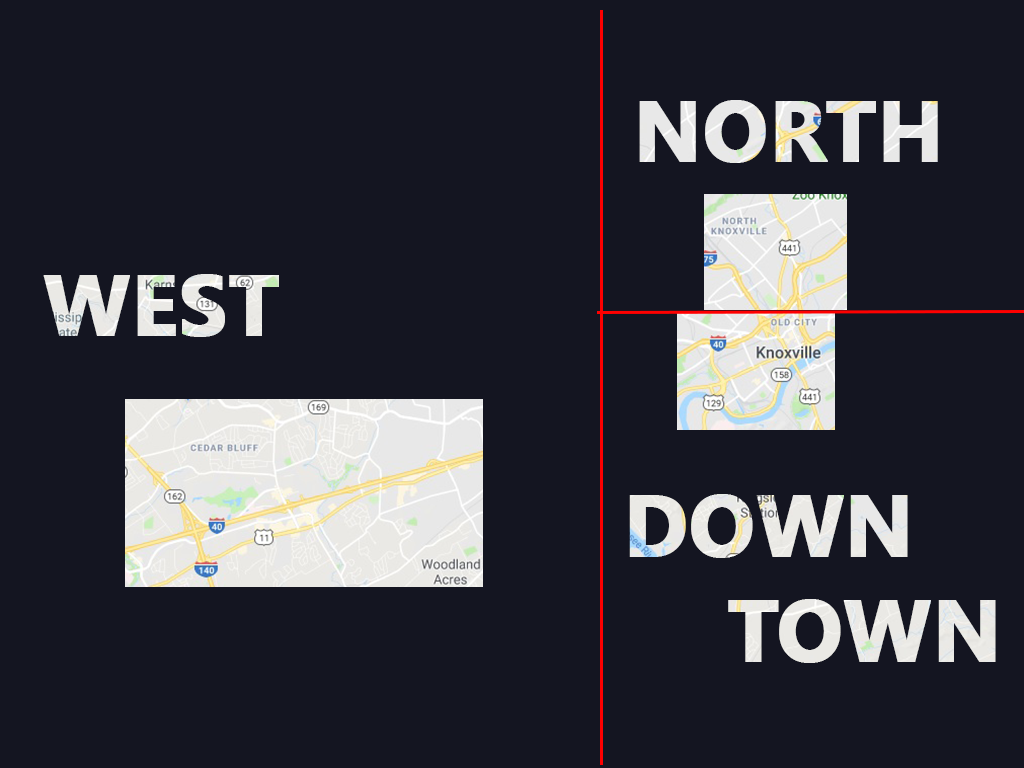
<style>
.page{position:relative;width:1024px;height:768px;background:#141521}
.page>*{position:absolute;margin:0}
.t1{font:85px "SegoeUI-Bold";color:#e8e8e8;font-weight:bold}
.t2{font:85px "SegoeUI-Bold";color:#eae9e5;font-weight:bold}
.t3{font:87.4px "SegoeUI-Bold";color:#eae9e5;font-weight:bold}
</style>
<div class="page">
<p class="t1" style="left:639px;top:100px;width:299px;height:63px">NORTH</p>
<p class="t2" style="left:43px;top:274px;width:236px;height:63px">WEST</p>
<p class="t3" style="left:629px;top:494px;width:367px;height:169px;text-align:right">DOWN<br>    TOWN</p>
</div>
